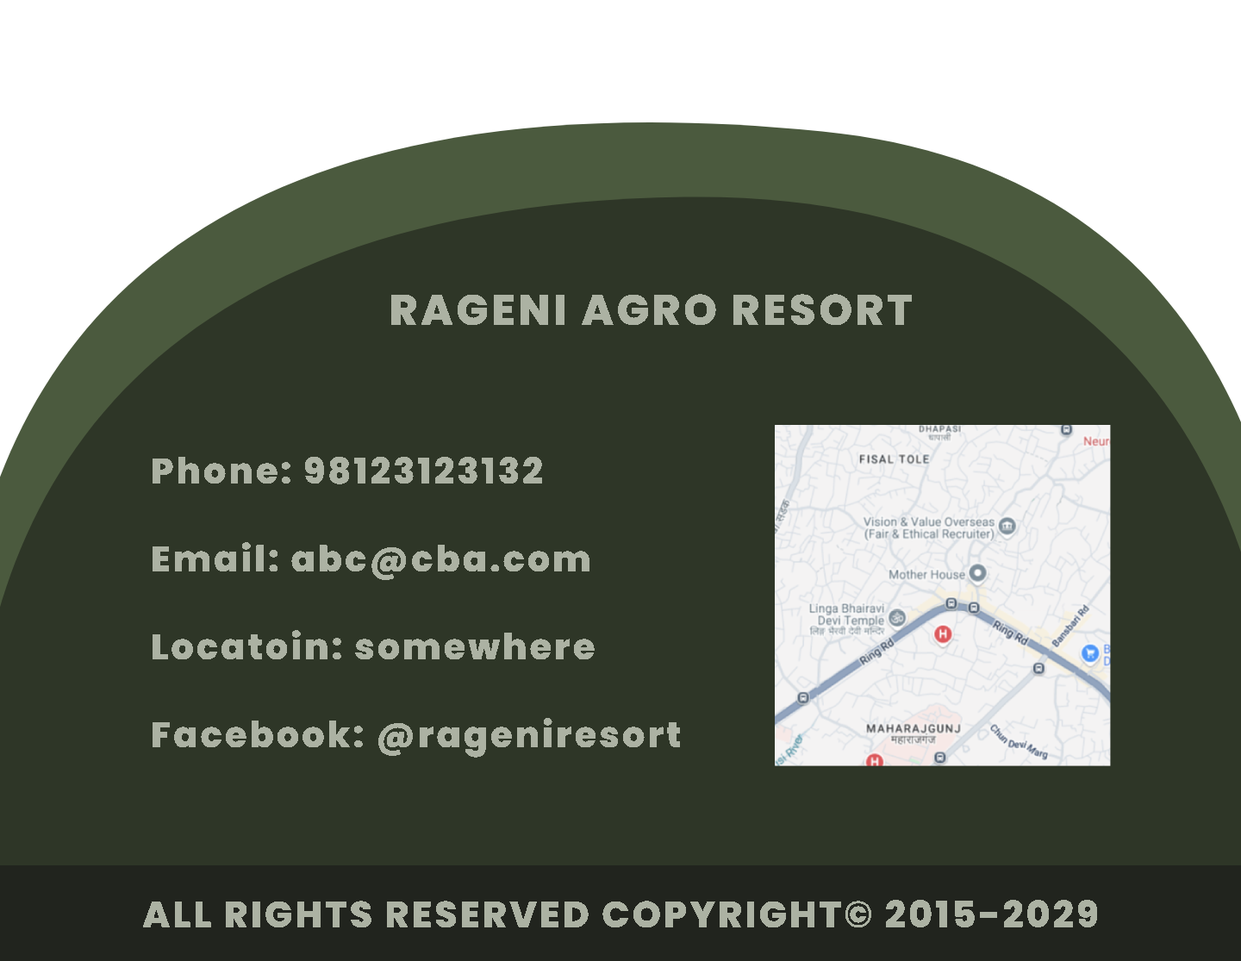
<style>
.page{position:relative;width:1241px;height:961px;background:#2e3627}
.page>*{position:absolute;margin:0}
.t1{font:42.7px "Poppins-ExtraBold";letter-spacing:0.073em;color:#acb2a3}
.t2{font:35.8px/87.9px "Poppins-ExtraBold";letter-spacing:0.073em;color:#acb2a3}
.t3{font:36.7px "Poppins-ExtraBold";letter-spacing:0.073em;color:#acb2a3}
</style>
<div class="page">
<p class="t1" style="left:391px;top:294px;width:522px;height:32px">RAGENI AGRO RESORT</p>
<p class="t2" style="left:153px;top:456px;width:528px;height:302px">Phone: 98123123132<br>Email: abc@cba.com<br>Locatoin: somewhere<br>Facebook: @rageniresort</p>
<p class="t3" style="left:142px;top:900px;width:956px;height:28px">ALL RIGHTS RESERVED COPYRIGHT© 2015-2029</p>
</div>
